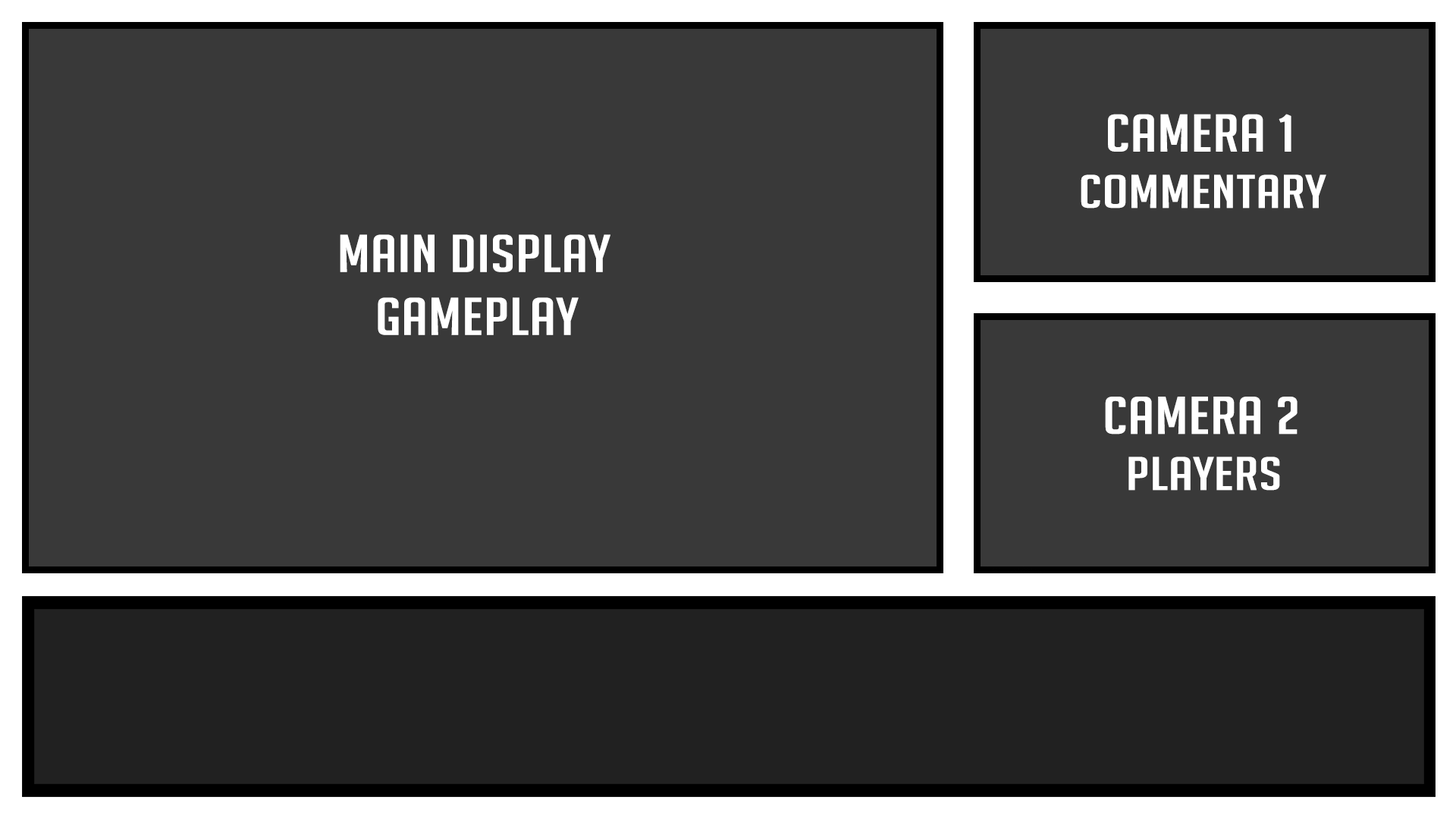
<style>
.page{position:relative;width:1456px;height:819px;background:#393939}
.page>*{position:absolute;margin:0}
.t1{font:52.1px "BigNoodleTitling";letter-spacing:0.01em;color:#ffffff;scale:1.31 1}
.t2{font:46.3px "BigNoodleTitling";letter-spacing:0.01em;color:#ffffff;scale:1.37 1}
</style>
<div class="page">
<p class="t1" style="left:1108px;top:114px;width:183px;height:38px">camera 1</p>
<p class="t2" style="left:1081px;top:174px;width:245px;height:35px">commentary</p>
<p class="t1" style="left:340px;top:234px;width:270px;height:38px">main display</p>
<p class="t1" style="left:378px;top:297px;width:201px;height:38px">gameplay</p>
<p class="t1" style="left:1105px;top:397px;width:192px;height:38px">camera 2</p>
<p class="t2" style="left:1128px;top:457px;width:152px;height:34px">players</p>
</div>
